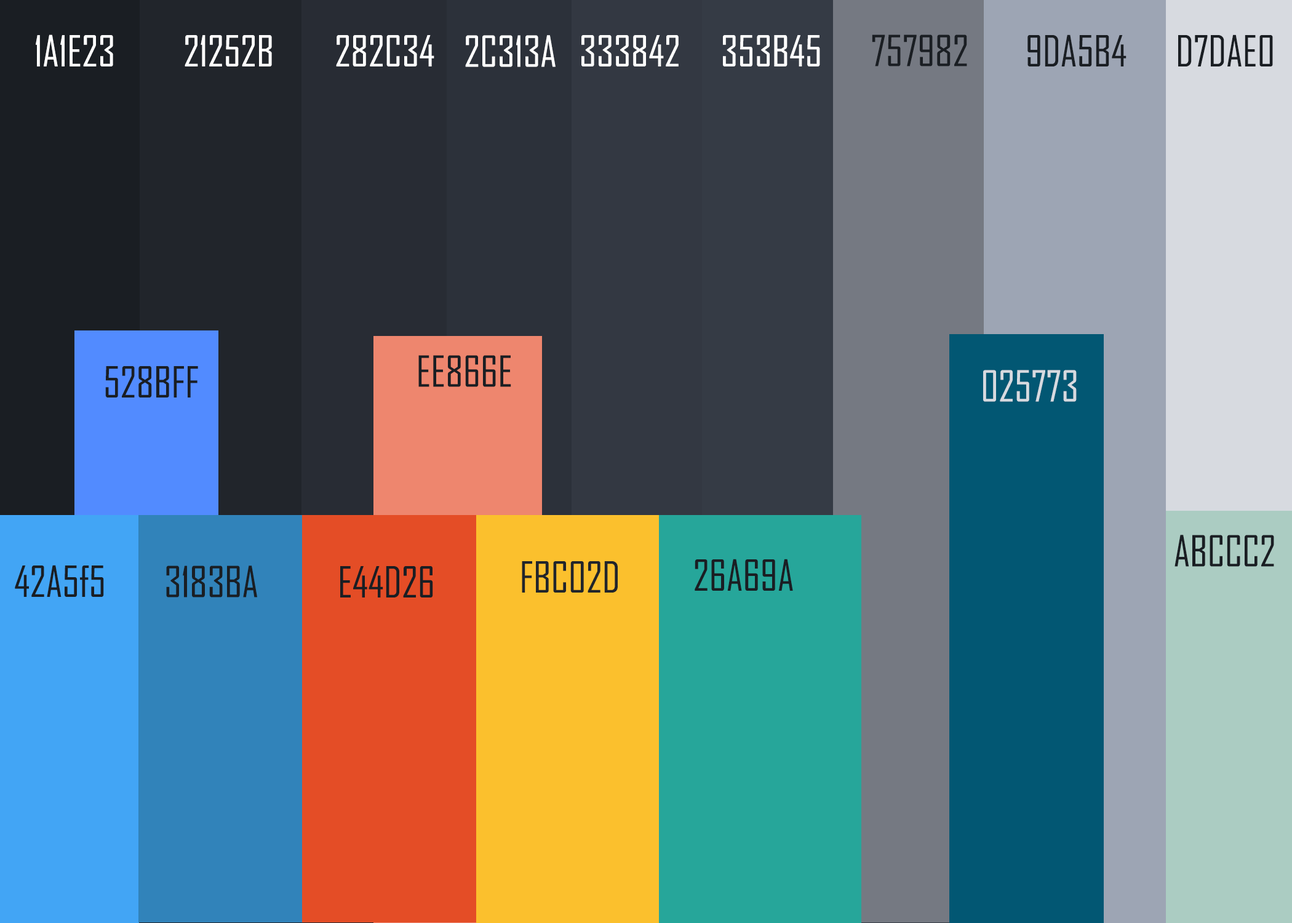
<style>
.page{position:relative;width:1292px;height:923px}
.page>*{position:absolute;margin:0}
.t1{font:41px "AgencyFB-Reg";color:#ffffff}
.t2{font:41px "AgencyFB-Reg";color:#1a1e23}
.t3{font:41px "AgencyFB-Reg";color:#d7dae0}
.t4{font:41px "AgencyFB-Reg";color:#21252b}
</style>
<div class="page">
<p class="t1" style="left:36px;top:34px;width:77px;height:32px">1A1E23</p>
<p class="t1" style="left:185px;top:35px;width:87px;height:31px">21252B</p>
<p class="t1" style="left:336px;top:35px;width:98px;height:31px">282C34</p>
<p class="t1" style="left:465px;top:35px;width:91px;height:32px">2C313A</p>
<p class="t1" style="left:581px;top:35px;width:98px;height:31px">333842</p>
<p class="t1" style="left:723px;top:35px;width:97px;height:31px">353B45</p>
<p class="t2" style="left:872px;top:34px;width:95px;height:32px">757982</p>
<p class="t2" style="left:1027px;top:34px;width:100px;height:32px">9DA5B4</p>
<p class="t2" style="left:1178px;top:34px;width:95px;height:32px">D7DAE0</p>
<p class="t2" style="left:418px;top:355px;width:93px;height:32px">EE866E</p>
<p class="t2" style="left:105px;top:366px;width:93px;height:31px">528BFF</p>
<p class="t3" style="left:983px;top:370px;width:94px;height:32px">025773</p>
<p class="t2" style="left:1175px;top:535px;width:99px;height:32px">ABCCC2</p>
<p class="t2" style="left:15px;top:565px;width:89px;height:32px">42A5f5</p>
<p class="t2" style="left:166px;top:565px;width:91px;height:32px">3183BA</p>
<p class="t2" style="left:340px;top:566px;width:93px;height:31px">E44D26</p>
<p class="t4" style="left:522px;top:561px;width:96px;height:31px">FBC02D</p>
<p class="t2" style="left:695px;top:559px;width:98px;height:32px">26A69A</p>
</div>
